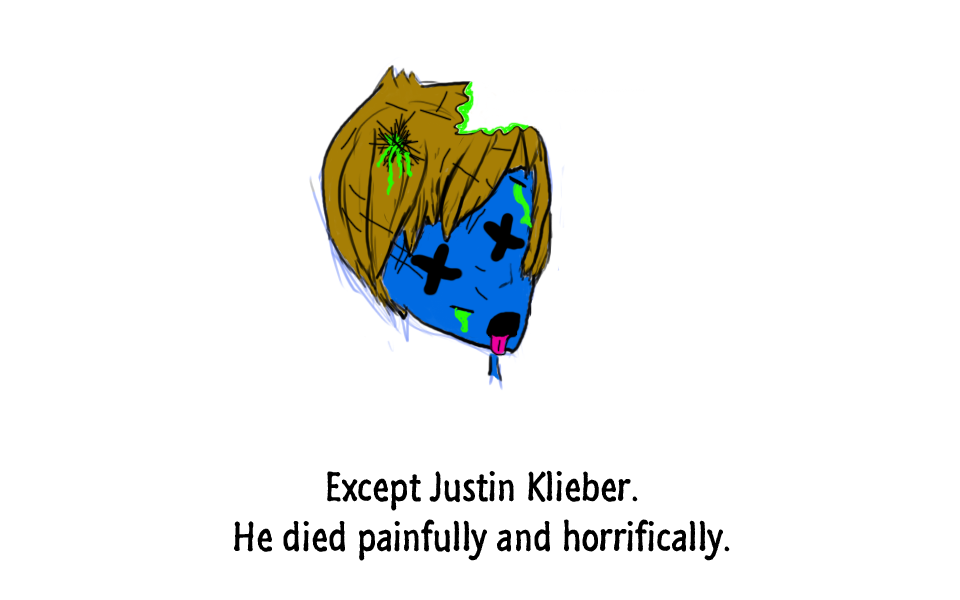
<style>
.page{position:relative;width:960px;height:600px;background:#ffffff}
.page>*{position:absolute;margin:0}
.t1{font:42px "SegoeMarker";color:#000000}
</style>
<div class="page">
<p class="t1" style="left:234px;top:470px;width:496px;height:91px;text-align:center">Except Justin Klieber.<br>He died painfully and horrifically.</p>
</div>
